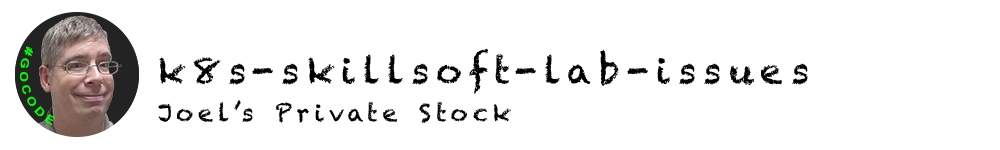
<style>
.page{position:relative;width:1000px;height:150px;background:#ffffff}
.page>*{position:absolute;margin:0}
.t1{font:11.2px "Arial-BoldMT";letter-spacing:0.2em;color:#00ff00}
.t2{font:36px "Chalkduster";letter-spacing:0.2em;color:#000000}
.t3{font:24px "Chalkduster";letter-spacing:0.2em;color:#000000}
</style>
<div class="page">
<p class="t1" style="left:19px;top:46px;width:37px;height:80px;rotate:72deg">#GOCODE</p>
<p class="t2" style="left:159px;top:48px;width:649px;height:46px">k8s-skillsoft-lab-issues</p>
<p class="t3" style="left:158px;top:100px;width:353px;height:23px">Joel’s Private Stock</p>
</div>
